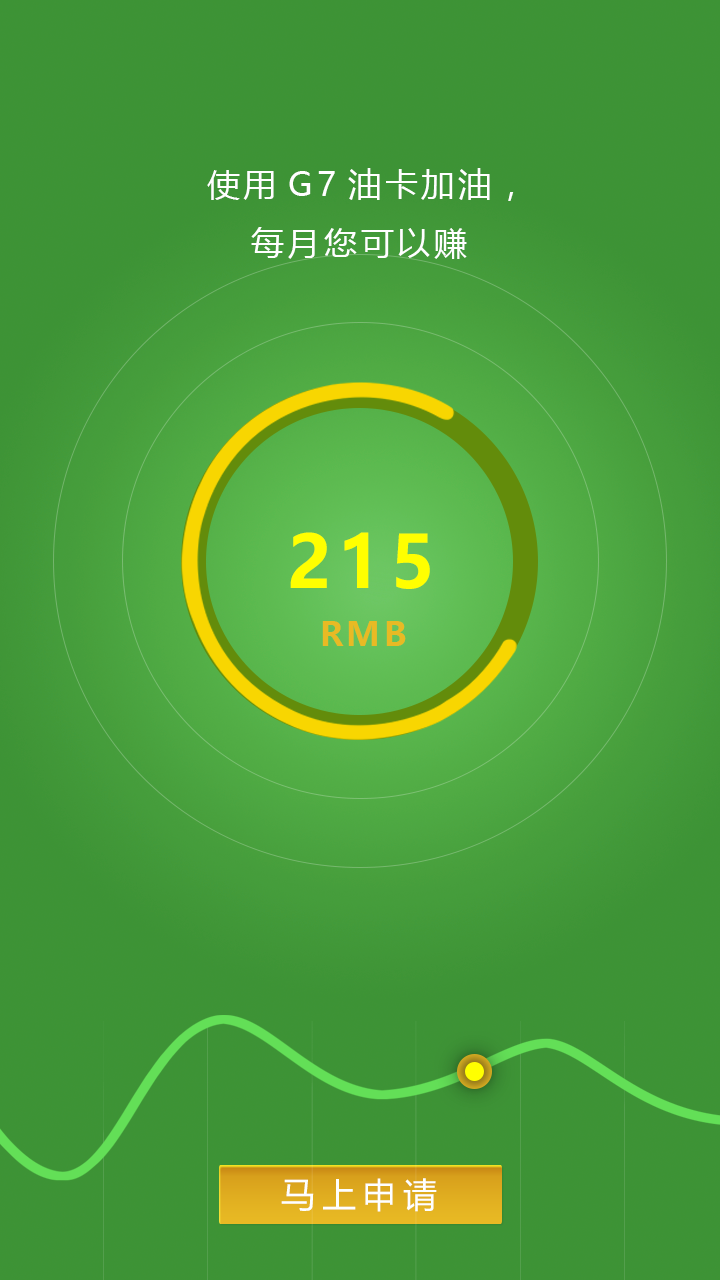
<style>
.page{position:relative;width:720px;height:1280px}
.page>*{position:absolute;margin:0}
.t1{font:33.3px "MicrosoftYaHei";letter-spacing:0.1em;color:#ffffff}
.t2{font:71.9px "MicrosoftYaHei-Bold";letter-spacing:0.1em;color:#ffff00}
.t3{font:33.3px "MicrosoftYaHei-Bold";letter-spacing:0.1em;color:#e8ba24}
.t4{font:34.4px "MicrosoftYaHei";letter-spacing:0.2em;color:#feffff}
</style>
<div class="page">
<p class="t1" style="left:207px;top:168px;width:307px;height:91px;text-align:center">使用G7油卡加油，<br>每月您可以赚</p>
<p class="t2" style="left:290px;top:532px;width:140px;height:57px">215</p>
<p class="t3" style="left:322px;top:621px;width:84px;height:25px">RMB</p>
<p class="t4" style="left:281px;top:1178px;width:156px;height:34px">马上申请</p>
</div>
